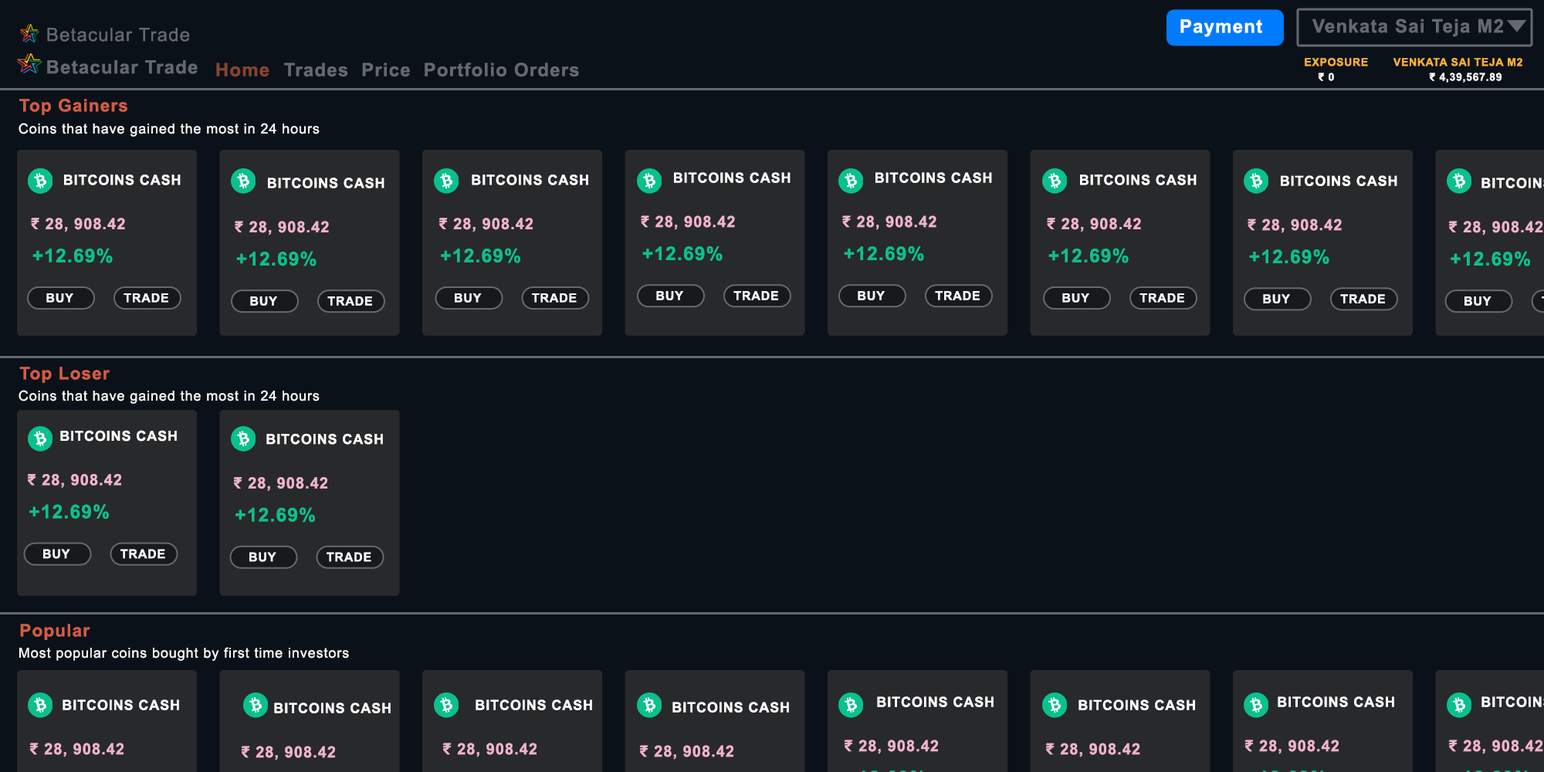
<style>
.page{position:relative;width:1544px;height:772px;background:#0b1119}
.page>*{position:absolute;margin:0}
.t1{font:18.5px "ArialMT";letter-spacing:0.05em;color:#646970}
.t2{font:18.5px "Arial-BoldMT";letter-spacing:0.05em;color:#ffffff}
.t3{font:18.5px "Arial-BoldMT";letter-spacing:0.05em;color:#646970}
.t4{font:18.5px "Arial-BoldMT";letter-spacing:0.05em;color:#87442f}
.t5{font:10.8px "Arial-BoldMT";letter-spacing:0.05em;color:#f9b23a}
.t6{font:10.8px "Arial-BoldMT";letter-spacing:0.05em;color:#fdfdfd}
.t7{font:17.4px "Arial-BoldMT";letter-spacing:0.05em;color:#d25c44}
.t8{font:13.9px "ArialMT";letter-spacing:0.05em;color:#fbfafa}
.t9{font:13.9px "Arial-BoldMT";letter-spacing:0.05em;color:#ffffff}
.t10{font:15.5px "Arial-BoldMT";letter-spacing:0.05em;color:#efb3cf}
.t11{font:18.9px "Arial-BoldMT";letter-spacing:0.05em;color:#0ac18e}
.t12{font:12.4px "Arial-BoldMT";letter-spacing:0.05em;color:#f2fdfa}
</style>
<div class="page">
<p class="t1" style="left:47px;top:28px;width:143px;height:14px">Betacular Trade</p>
<p class="t2" style="left:1181px;top:19px;width:81px;height:18px">Payment</p>
<p class="t3" style="left:1313px;top:19px;width:190px;height:18px">Venkata Sai Teja M2</p>
<p class="t3" style="left:47px;top:60px;width:151px;height:14px">Betacular Trade</p>
<p class="t3" style="left:216px;top:63px;width:363px;height:14px"><span class="t4">Home</span>   Trades  Price  Portfolio Orders</p>
<p class="t5" style="left:1305px;top:58px;width:218px;height:8px">EXPOSURE       VENKATA SAI TEJA M2</p>
<p class="t6" style="left:1318px;top:73px;width:184px;height:10px">₹ 0     ₹ 4,39,567.89</p>
<p class="t7" style="left:19px;top:98px;width:108px;height:17px">Top Gainers</p>
<p class="t8" style="left:19px;top:123px;width:301px;height:14px">Coins that have gained the most in 24 hours</p>
<p class="t9" style="left:674px;top:172px;width:117px;height:11px">BITCOINS CASH</p>
<p class="t9" style="left:876px;top:172px;width:116px;height:11px">BITCOINS CASH</p>
<p class="t9" style="left:64px;top:175px;width:117px;height:10px">BITCOINS CASH</p>
<p class="t9" style="left:268px;top:178px;width:117px;height:10px">BITCOINS CASH</p>
<p class="t9" style="left:472px;top:175px;width:116px;height:10px">BITCOINS CASH</p>
<p class="t9" style="left:1080px;top:175px;width:117px;height:10px">BITCOINS CASH</p>
<p class="t9" style="left:1281px;top:175px;width:117px;height:11px">BITCOINS CASH</p>
<p class="t10" style="left:31px;top:218px;width:94px;height:14px">₹ 28, 908.42</p>
<p class="t10" style="left:235px;top:221px;width:94px;height:15px">₹ 28, 908.42</p>
<p class="t10" style="left:439px;top:218px;width:94px;height:14px">₹ 28, 908.42</p>
<p class="t10" style="left:641px;top:215px;width:94px;height:15px">₹ 28, 908.42</p>
<p class="t10" style="left:842px;top:215px;width:95px;height:15px">₹ 28, 908.42</p>
<p class="t10" style="left:1047px;top:218px;width:94px;height:14px">₹ 28, 908.42</p>
<p class="t10" style="left:1248px;top:219px;width:94px;height:14px">₹ 28, 908.42</p>
<p class="t10" style="left:1449px;top:221px;width:95px;height:15px">₹ 28, 908.42</p>
<p class="t11" style="left:32px;top:248px;width:81px;height:15px">+12.69%</p>
<p class="t11" style="left:236px;top:251px;width:81px;height:15px">+12.69%</p>
<p class="t11" style="left:441px;top:248px;width:79px;height:15px">+12.69%</p>
<p class="t11" style="left:642px;top:246px;width:81px;height:15px">+12.69%</p>
<p class="t11" style="left:844px;top:246px;width:80px;height:15px">+12.69%</p>
<p class="t11" style="left:1049px;top:248px;width:80px;height:15px">+12.69%</p>
<p class="t11" style="left:1249px;top:249px;width:81px;height:15px">+12.69%</p>
<p class="t11" style="left:1451px;top:251px;width:79px;height:15px">+12.69%</p>
<p class="t12" style="left:46px;top:293px;width:27px;height:10px">BUY</p>
<p class="t12" style="left:124px;top:293px;width:44px;height:10px">TRADE</p>
<p class="t12" style="left:455px;top:293px;width:27px;height:10px">BUY</p>
<p class="t12" style="left:532px;top:293px;width:45px;height:10px">TRADE</p>
<p class="t12" style="left:656px;top:291px;width:27px;height:9px">BUY</p>
<p class="t12" style="left:734px;top:291px;width:44px;height:9px">TRADE</p>
<p class="t12" style="left:858px;top:291px;width:27px;height:9px">BUY</p>
<p class="t12" style="left:935px;top:291px;width:45px;height:9px">TRADE</p>
<p class="t12" style="left:1062px;top:293px;width:28px;height:10px">BUY</p>
<p class="t12" style="left:1140px;top:293px;width:44px;height:10px">TRADE</p>
<p class="t12" style="left:250px;top:297px;width:27px;height:9px">BUY</p>
<p class="t12" style="left:327px;top:297px;width:45px;height:9px">TRADE</p>
<p class="t12" style="left:1263px;top:294px;width:27px;height:9px">BUY</p>
<p class="t12" style="left:1340px;top:294px;width:45px;height:9px">TRADE</p>
<p class="t12" style="left:1465px;top:297px;width:27px;height:9px">BUY</p>
<p class="t7" style="left:19px;top:367px;width:91px;height:16px">Top Loser</p>
<p class="t8" style="left:19px;top:390px;width:301px;height:14px">Coins that have gained the most in 24 hours</p>
<p class="t9" style="left:60px;top:430px;width:117px;height:12px">BITCOINS CASH</p>
<p class="t9" style="left:266px;top:433px;width:117px;height:12px">BITCOINS CASH</p>
<p class="t10" style="left:27px;top:474px;width:94px;height:14px">₹ 28, 908.42</p>
<p class="t10" style="left:233px;top:477px;width:94px;height:14px">₹ 28, 908.42</p>
<p class="t11" style="left:29px;top:504px;width:80px;height:15px">+12.69%</p>
<p class="t11" style="left:236px;top:507px;width:79px;height:16px">+12.69%</p>
<p class="t12" style="left:43px;top:549px;width:27px;height:10px">BUY</p>
<p class="t12" style="left:120px;top:549px;width:45px;height:10px">TRADE</p>
<p class="t12" style="left:249px;top:552px;width:27px;height:10px">BUY</p>
<p class="t12" style="left:327px;top:552px;width:44px;height:10px">TRADE</p>
<p class="t7" style="left:20px;top:624px;width:70px;height:16px">Popular</p>
<p class="t8" style="left:19px;top:647px;width:330px;height:14px">Most popular coins bought by first time investors</p>
<p class="t9" style="left:63px;top:700px;width:116px;height:10px">BITCOINS CASH</p>
<p class="t9" style="left:476px;top:700px;width:116px;height:10px">BITCOINS CASH</p>
<p class="t9" style="left:673px;top:702px;width:116px;height:11px">BITCOINS CASH</p>
<p class="t9" style="left:877px;top:696px;width:117px;height:11px">BITCOINS CASH</p>
<p class="t9" style="left:1079px;top:700px;width:116px;height:10px">BITCOINS CASH</p>
<p class="t9" style="left:1278px;top:696px;width:117px;height:11px">BITCOINS CASH</p>
<p class="t9" style="left:274px;top:703px;width:117px;height:10px">BITCOINS CASH</p>
<p class="t10" style="left:29px;top:743px;width:95px;height:14px">₹ 28, 908.42</p>
<p class="t10" style="left:241px;top:746px;width:94px;height:15px">₹ 28, 908.42</p>
<p class="t10" style="left:442px;top:743px;width:95px;height:14px">₹ 28, 908.42</p>
<p class="t10" style="left:639px;top:745px;width:95px;height:15px">₹ 28, 908.42</p>
<p class="t10" style="left:844px;top:740px;width:94px;height:14px">₹ 28, 908.42</p>
<p class="t10" style="left:1045px;top:743px;width:95px;height:14px">₹ 28, 908.42</p>
<p class="t10" style="left:1245px;top:740px;width:94px;height:14px">₹ 28, 908.42</p>
<p class="t10" style="left:1449px;top:740px;width:95px;height:14px">₹ 28, 908.42</p>
</div>
